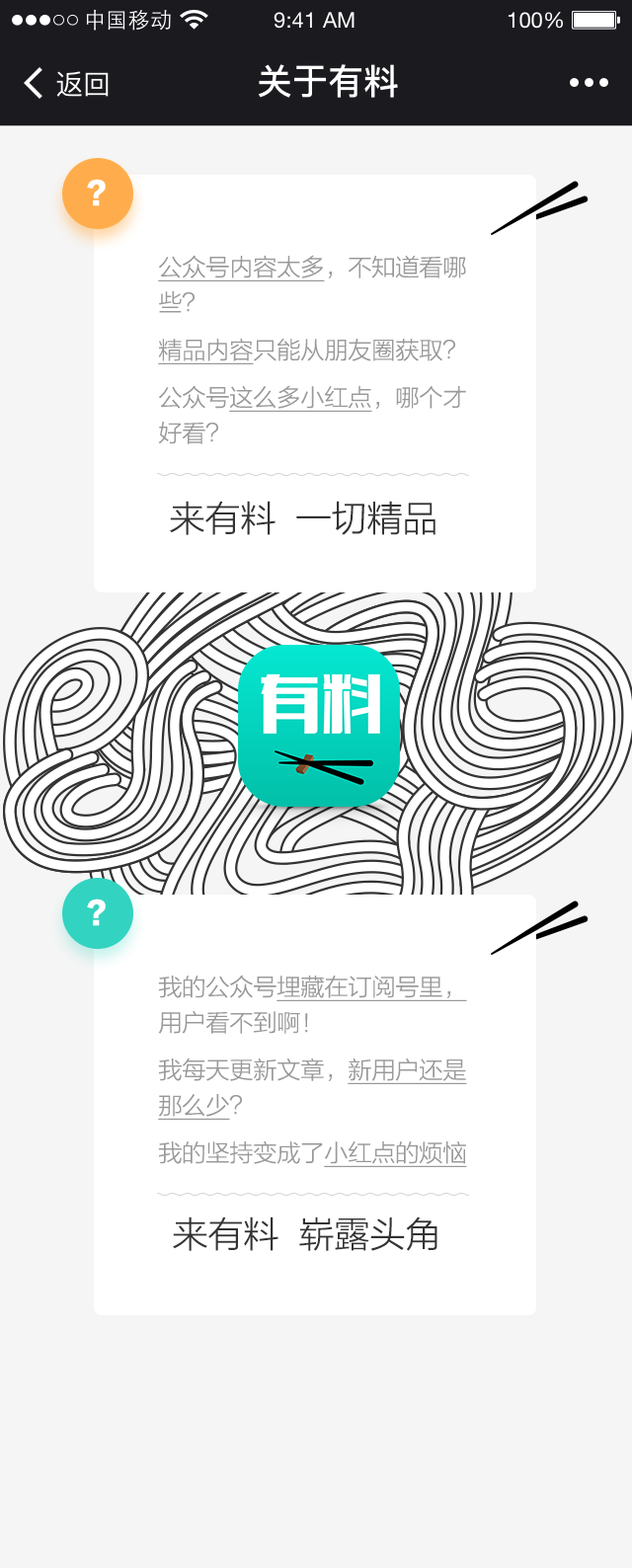
<style>
.page{position:relative;width:632px;height:1568px;background:#f5f5f5}
.page>*{position:absolute;margin:0}
.t1{font:29.6px "FZLTTHK--GBK1-0";color:#ffffff}
.t2{font:23.7px/47.4px "FZLTXHK--GBK1-0";color:#999999}
.t3{font:23.7px/35.5px "FZLTXHK--GBK1-0";color:#999999;text-decoration:underline}
.t4{font:23.7px/35.5px "FZLTXHK--GBK1-0";color:#999999}
.t5{font:23.7px/47.4px "FZLTXHK--GBK1-0";color:#999999;text-decoration:underline}
.t6{font:35.5px "FZLTXHK--GBK1-0";color:#333333}
</style>
<div class="page">
<p class="t1" style="left:87px;top:179px;width:19px;height:27px">?</p>
<p class="t2" style="left:158px;top:255px;width:308px;height:189px"><span class="t3">公众号内容太多</span><span class="t4">，不知道看哪些？<br></span><span class="t5">精品内容</span>只能从朋友圈获取？<br>公众号<span class="t5">这么多小红点</span>，哪个才<span class="t4">好看？</span></p>
<p class="t6" style="left:170px;top:501px;width:265px;height:34px">来有料  一切精品</p>
<p class="t1" style="left:87px;top:899px;width:19px;height:27px">?</p>
<p class="t3" style="left:158px;top:975px;width:309px;height:192px"><span class="t4">我的公众号</span>埋藏在订阅号里，<span class="t4">用户看不到啊！<br></span><span class="t2">我每天更新文章，</span><span class="t5">新用户还是</span>那么少<span class="t4">？<br></span><span class="t2">我的坚持变成了</span><span class="t5">小红点的烦恼</span></p>
<p class="t6" style="left:173px;top:1216px;width:264px;height:35px">来有料  崭露头角</p>
</div>
